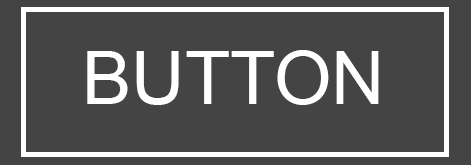
<style>
.page{position:relative;width:471px;height:165px;background:#444444}
.page>*{position:absolute;margin:0}
.t1{font:74.1px "ArialMT";color:#ffffff}
</style>
<div class="page">
<p class="t1" style="left:87px;top:50px;width:292px;height:55px">BUTTON</p>
</div>
